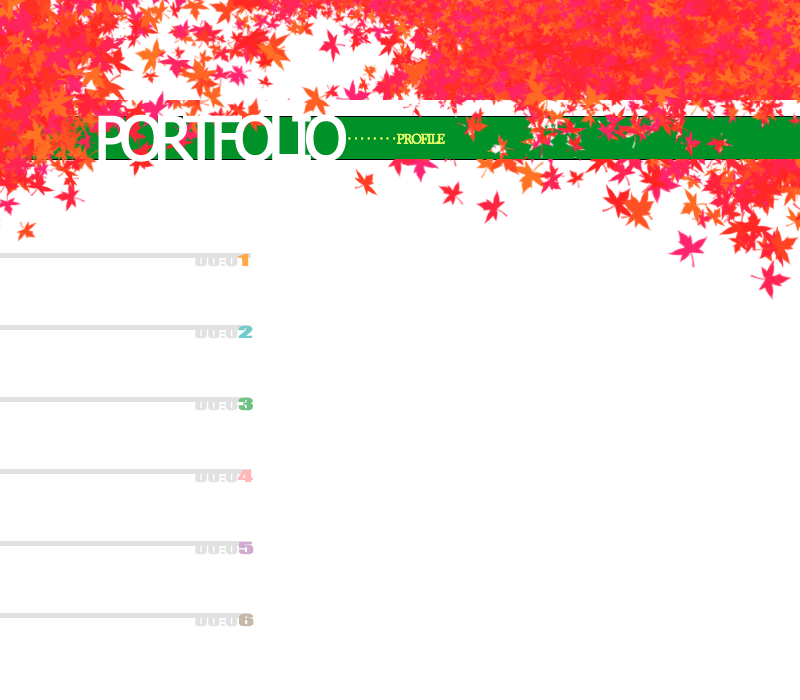
<style>
.page{position:relative;width:800px;height:700px;background:#ffffff}
.page>*{position:absolute;margin:0}
.t1{font:60px "Tahoma";letter-spacing:-0.16em;color:#ffffff;font-weight:bold}
.t2{font:14px "Sylfaen";letter-spacing:-0.12em;color:#efff6a;font-weight:bold}
.t3{font:14px "Batang";letter-spacing:-0.12em;color:#efff6a;font-weight:bold}
.t4{font:12px/36px "Impact";color:#e1e1e1;scale:2 1}
.t5{font:15px/36px "Impact";color:#ffa944;scale:2 1}
.t6{font:15px/36px "Impact";color:#71cbca;scale:2 1}
.t7{font:15px/36px "Impact";color:#70c183;scale:2 1}
.t8{font:15px/36px "Impact";color:#ffb8b8;scale:2 1}
.t9{font:15px/36px "Impact";color:#d0aad1;scale:2 1}
.t10{font:15px/36px "Impact";color:#c5b7a4;scale:2 1}
</style>
<div class="page">
<p class="t1" style="left:98px;top:114px;width:248px;height:48px">PORTFOLIO</p>
<p class="t2" style="left:348px;top:133px;width:97px;height:11px"><span class="t3">‥‥‥‥</span>PROFILE</p>
<p class="t4" style="left:195px;top:254px;width:59px;height:373px">00:0<span class="t5">1<br><br></span>00:0<span class="t6">2<br><br></span>00:0<span class="t7">3<br><br></span>00:0<span class="t8">4<br><br></span>00:0<span class="t9">5<br><br></span>00:0<span class="t10">6</span></p>
</div>
